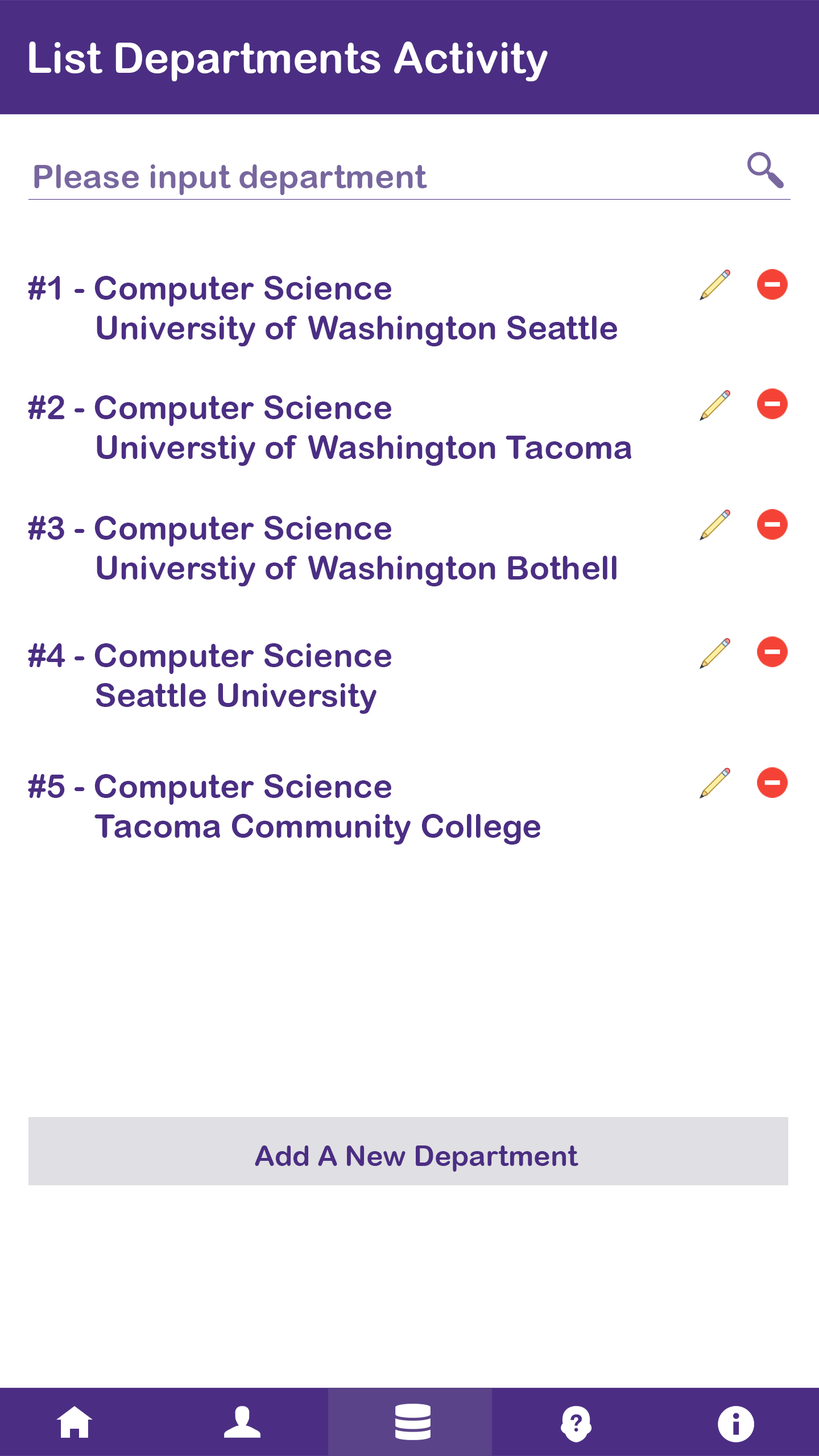
<style>
.page{position:relative;width:819px;height:1456px;background:#ffffff}
.page>*{position:absolute;margin:0}
.t1{font:42.7px "ArialRoundedMTBold";color:#ffffff}
.t2{font:33.2px "ArialRoundedMTBold";color:#78679f}
.t3{font:33.2px "ArialRoundedMTBold";color:#4b2e83}
.t4{font:28.4px "ArialRoundedMTBold";color:#4b2e83}
</style>
<div class="page">
<p class="t1" style="left:29px;top:42px;width:519px;height:39px">List Departments Activity</p>
<p class="t2" style="left:34px;top:164px;width:393px;height:31px">Please input department</p>
<p class="t3" style="left:28px;top:276px;width:589px;height:70px">#1 - Computer Science<br>        University of Washington Seattle</p>
<p class="t3" style="left:28px;top:395px;width:603px;height:71px">#2 - Computer Science<br>        Universtiy of Washington Tacoma</p>
<p class="t3" style="left:28px;top:516px;width:589px;height:70px">#3 - Computer Science<br>        Universtiy of Washington Bothell</p>
<p class="t3" style="left:28px;top:643px;width:363px;height:71px">#4 - Computer Science<br>        Seattle University</p>
<p class="t3" style="left:28px;top:774px;width:512px;height:71px">#5 - Computer Science<br>        Tacoma Community College</p>
<p class="t4" style="left:255px;top:1145px;width:323px;height:27px">Add A New Department</p>
</div>
